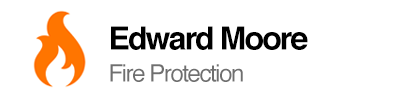
<style>
.page{position:relative;width:400px;height:100px;background:#ffffff}
.page>*{position:absolute;margin:0}
.t1{font:32px "Helvetica-Bold";letter-spacing:-0.06em;color:#000000}
.t2{font:24px "Helvetica";letter-spacing:-0.06em;color:#6f6f6f}
</style>
<div class="page">
<p class="t1" style="left:111px;top:26px;width:197px;height:24px">Edward Moore</p>
<p class="t2" style="left:110px;top:64px;width:133px;height:18px">Fire Protection</p>
</div>
